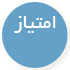
<style>
.page{position:relative;width:70px;height:70px;background:#65a1c6}
.page>*{position:absolute;margin:0}
.t1{font:21px "BYekan";color:#ffffff}
</style>
<div class="page">
<p class="t1" style="left:14px;top:16px;width:42px;height:17px">امتیاز</p>
</div>
